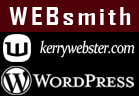
<style>
.page{position:relative;width:139px;height:96px;background:#000000}
.page>*{position:absolute;margin:0}
.t1{font:24px "AgencyFB-Bold";letter-spacing:0.1em;color:#ffffff;scale:1.25 1}
.t2{font:16.8px "Constantia-Italic";letter-spacing:-0.05em;color:#ffffff;scale:0.83 1}
</style>
<div class="page">
<p class="t1" style="left:9px;top:7px;width:122px;height:18px">WEBsmith</p>
<p class="t2" style="left:40px;top:40px;width:95px;height:18px">kerrywebster.com</p>
</div>
